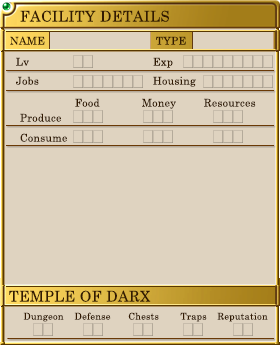
<style>
.page{position:relative;width:280px;height:345px;background:#dfd3c0}
.page>*{position:absolute;margin:0}
.t1{font:14.7px "CenturySchoolbook";letter-spacing:0.025em;color:#321a02}
.t2{font:10.7px "CenturySchoolbook";letter-spacing:0.025em;color:#321a02}
.t3{font:9.3px "CenturySchoolbook";letter-spacing:0.025em;color:#321a02}
</style>
<div class="page">
<p class="t1" style="left:20px;top:10px;width:149px;height:12px">FACILITY DETAILS</p>
<p class="t2" style="left:10px;top:36px;width:35px;height:9px">NAME</p>
<p class="t2" style="left:156px;top:36px;width:30px;height:9px">TYPE</p>
<p class="t2" style="left:16px;top:57px;width:13px;height:9px">Lv</p>
<p class="t2" style="left:153px;top:57px;width:20px;height:11px">Exp</p>
<p class="t2" style="left:16px;top:76px;width:23px;height:9px">Jobs</p>
<p class="t2" style="left:153px;top:76px;width:43px;height:11px">Housing</p>
<p class="t2" style="left:75px;top:98px;width:25px;height:9px">Food</p>
<p class="t2" style="left:142px;top:98px;width:34px;height:11px">Money</p>
<p class="t2" style="left:204px;top:98px;width:52px;height:9px">Resources</p>
<p class="t2" style="left:20px;top:113px;width:41px;height:9px">Produce</p>
<p class="t2" style="left:20px;top:133px;width:47px;height:9px">Consume</p>
<p class="t1" style="left:9px;top:290px;width:142px;height:12px">TEMPLE OF DARX</p>
<p class="t3" style="left:23px;top:312px;width:41px;height:10px">Dungeon</p>
<p class="t3" style="left:74px;top:312px;width:37px;height:8px">Defense</p>
<p class="t3" style="left:128px;top:312px;width:31px;height:8px">Chests</p>
<p class="t3" style="left:180px;top:312px;width:27px;height:10px">Traps</p>
<p class="t3" style="left:217px;top:312px;width:51px;height:10px">Reputation</p>
</div>
